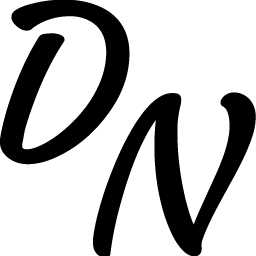
<style>
.page{position:relative;width:256px;height:256px;background:#ffffff}
.page>*{position:absolute;margin:0}
.t1{font:215px "Courgette-Regular";letter-spacing:-0.01em;color:#000000}
</style>
<div class="page">
<p class="t1" style="left:0px;top:0px;width:130px;height:165px">D</p>
<p class="t1" style="left:93px;top:92px;width:163px;height:166px">N</p>
</div>
